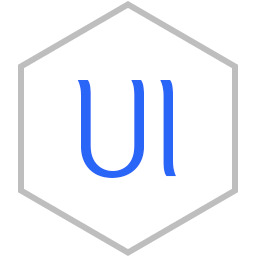
<style>
.page{position:relative;width:256px;height:256px;background:#ffffff}
.page>*{position:absolute;margin:0}
.t1{font:135.1px "Emirates-Light";color:#2965f7}
</style>
<div class="page">
<p class="t1" style="left:77px;top:80px;width:99px;height:98px">UI</p>
</div>
